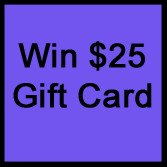
<style>
.page{position:relative;width:167px;height:167px;background:#7255ee}
.page>*{position:absolute;margin:0}
.t1{font:33.3px "ArialMT";color:#000000;font-weight:bold}
</style>
<div class="page">
<p class="t1" style="left:13px;top:41px;width:139px;height:67px;text-align:center">Win $25<br>Gift Card</p>
</div>
